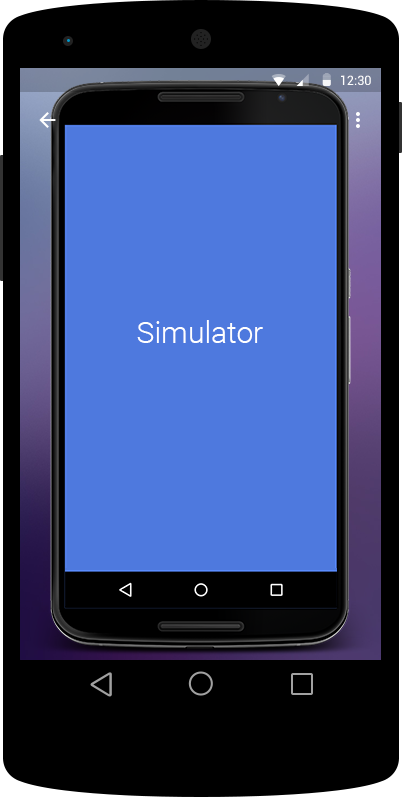
<style>
.page{position:relative;width:402px;height:797px;background:#4e79de}
.page>*{position:absolute;margin:0}
.t1{font:12.7px "Roboto-Regular";color:#ffffff}
.t2{font:30px "Roboto-Light";color:#ffffff}
</style>
<div class="page">
<p class="t1" style="left:341px;top:75px;width:30px;height:10px">12:30</p>
<p class="t2" style="left:137px;top:320px;width:126px;height:23px">Simulator</p>
</div>
